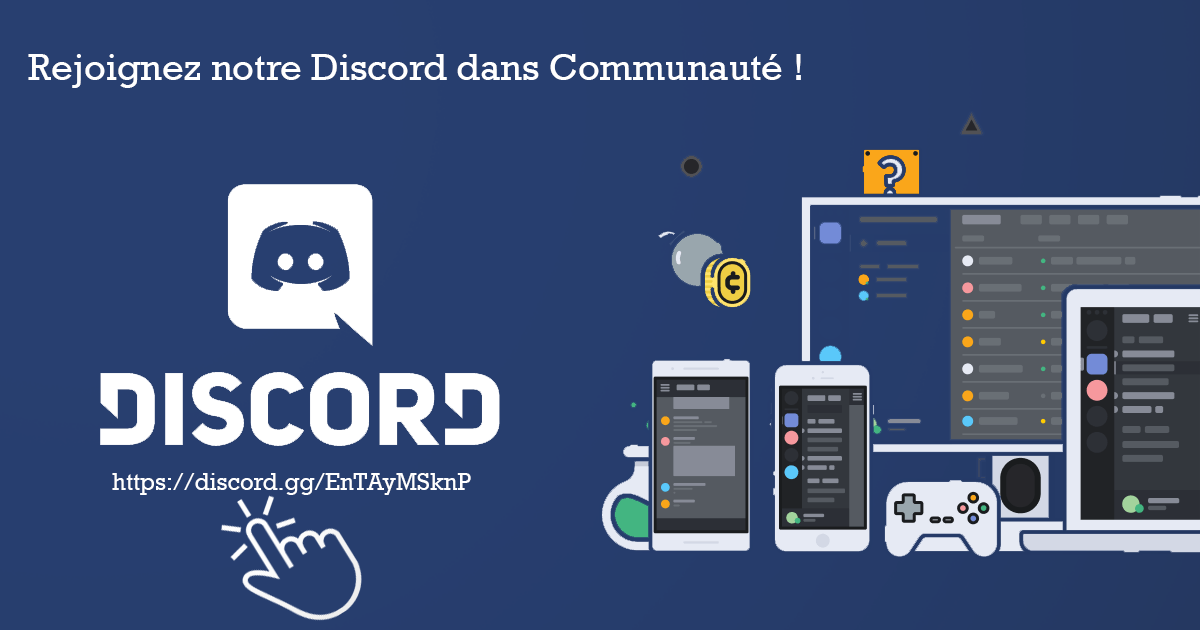
<style>
.page{position:relative;width:1200px;height:630px}
.page>*{position:absolute;margin:0}
.t1{font:38px "Rockwell";color:#ffffff}
.t2{font:24px "Rockwell";color:#ffffff}
</style>
<div class="page">
<p class="t1" style="left:28px;top:54px;width:773px;height:34px">Rejoignez notre Discord dans Communauté !</p>
<p class="t2" style="left:112px;top:473px;width:359px;height:22px">https://discord.gg/EnTAyMSknP</p>
</div>
